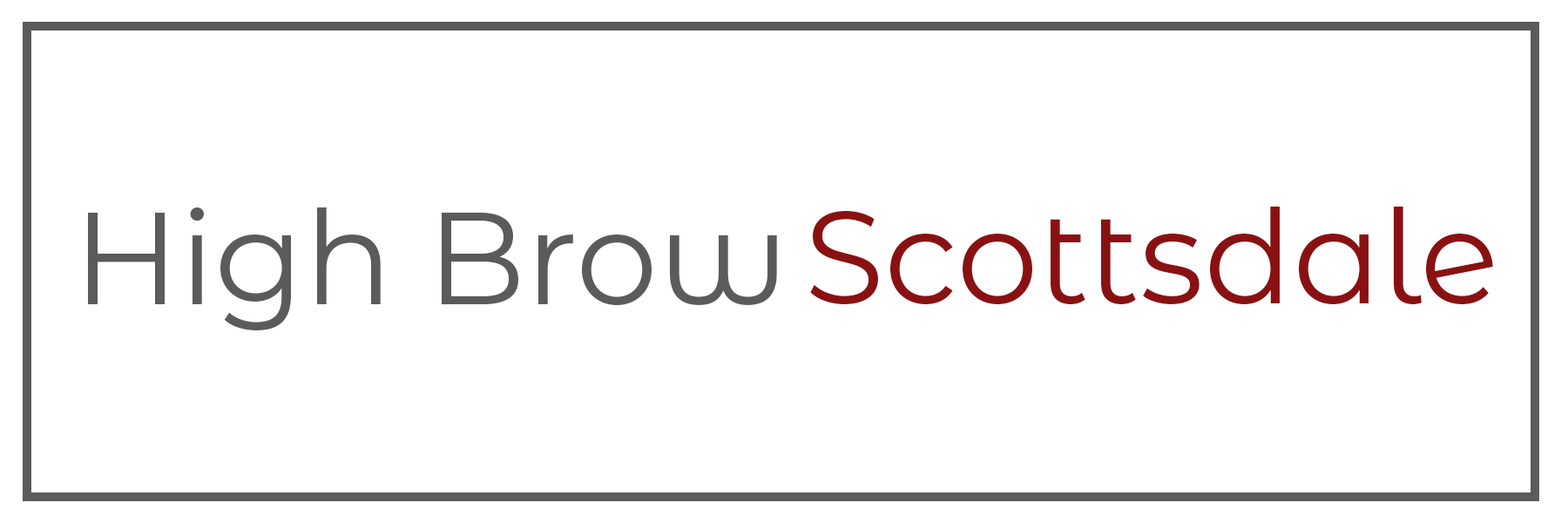
<style>
.page{position:relative;width:1568px;height:523px;background:#ffffff}
.page>*{position:absolute;margin:0}
.t1{font:130.7px "MontserratAlternates-Regular";color:#5c5b5b}
.t2{font:130.7px "MontserratAlternates-Regular";color:#8a1112}
</style>
<div class="page">
<p class="t1" style="left:88px;top:206px;width:689px;height:125px">High Brow</p>
<p class="t2" style="left:810px;top:206px;width:683px;height:99px">Scottsdale</p>
</div>
